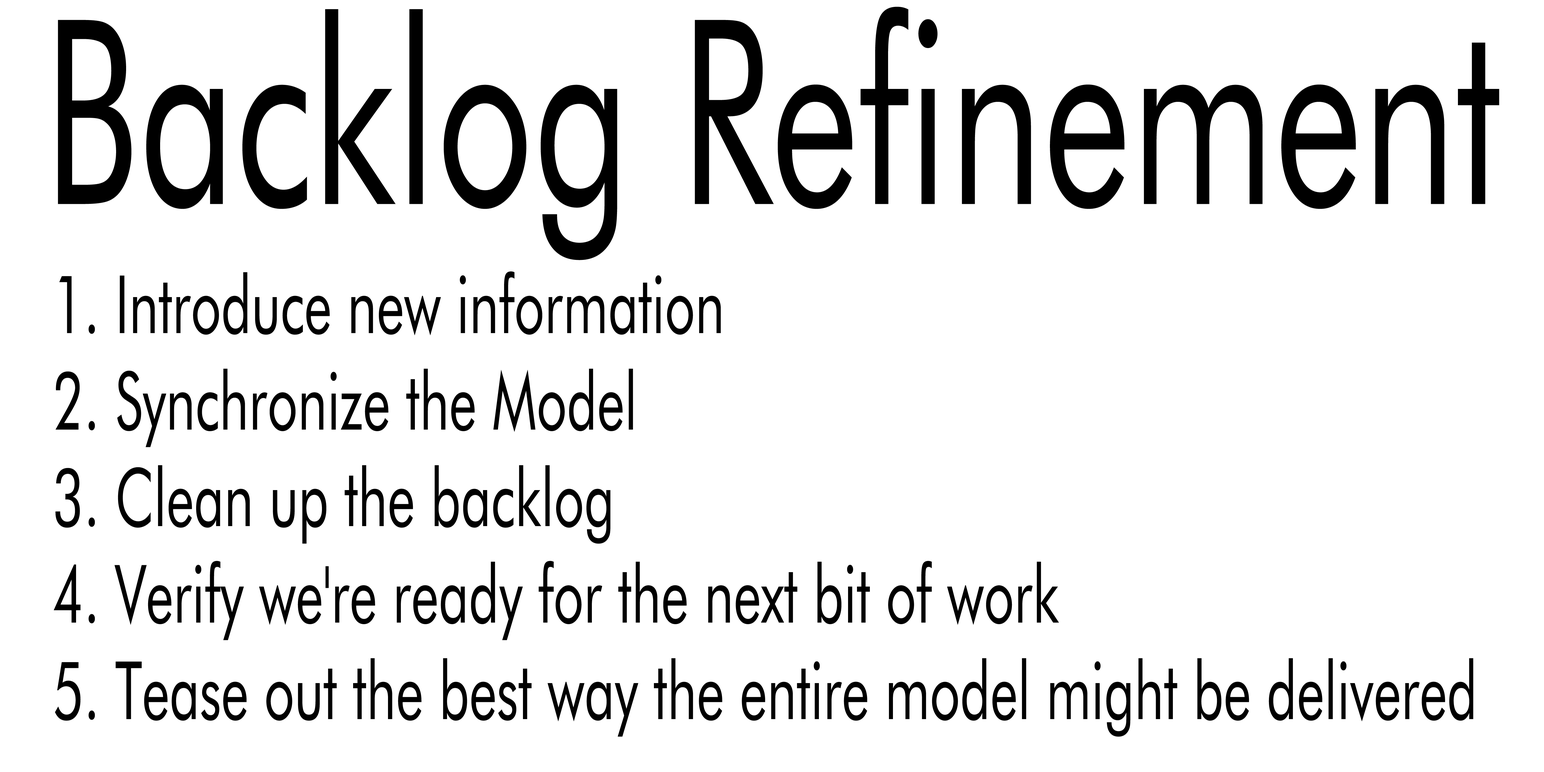
<style>
.page{position:relative;width:1544px;height:772px;background:#ffffff}
.page>*{position:absolute;margin:0}
.t1{font:257.4px "FuturaBT-Book";color:#000000;scale:0.66 1}
.t2{font:80.4px "FuturaBT-Book";color:#000000;scale:0.66 1}
</style>
<div class="page">
<p class="t1" style="left:58px;top:7px;width:1442px;height:253px">Backlog Refinement</p>
<p class="t2" style="left:54px;top:271px;width:1420px;height:466px">1. Introduce new information<br>2. Synchronize the Model<br>3. Clean up the backlog<br>4. Verify we're ready for the next bit of work<br>5. Tease out the best way the entire model might be delivered</p>
</div>
